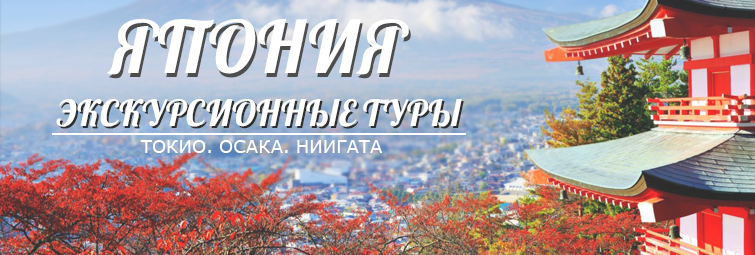
<style>
.page{position:relative;width:755px;height:255px}
.page>*{position:absolute;margin:0}
.t1{font:72px "Lobster";color:#ffffff;text-transform:uppercase}
.t2{font:36px "Lobster";color:#ffffff;text-transform:uppercase}
.t3{font:36px "Lobster";text-transform:uppercase}
.t4{font:18px "Verdana";color:#ffffff;text-transform:uppercase}
</style>
<div class="page">
<p class="t1" style="left:107px;top:19px;width:302px;height:56px">Япония</p>
<p class="t2" style="left:56px;top:99px;width:406px;height:28px">экскурсионные туры</p>
<p class="t3" style="left:58px;top:101px;width:406px;height:28px">экскурсионные туры</p>
<p class="t4" style="left:140px;top:140px;width:242px;height:13px">Токио. Осака. Ниигата</p>
</div>
